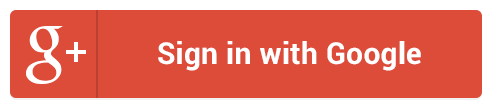
<style>
.page{position:relative;width:492px;height:108px;background:#dd4b39}
.page>*{position:absolute;margin:0}
.t1{font:30px "Roboto-Bold";letter-spacing:0.01em;color:#ffffff}
.t2{font:30px "Roboto-Bold";letter-spacing:0.05em;color:#ffffff}
</style>
<div class="page">
<p class="t1" style="left:158px;top:41px;width:263px;height:30px">Sign in with Googl<span class="t2">e</span></p>
</div>
